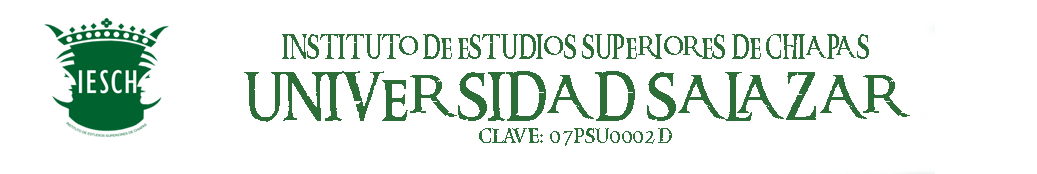
<style>
.page{position:relative;width:1037px;height:174px;background:#ffffff}
.page>*{position:absolute;margin:0}
.t1{font:23.2px "RingbearerMedium";color:#2c6d38;scale:0.96 1}
.t2{font:47.1px "RingbearerMedium";color:#2c6d38;scale:1.11 1}
</style>
<div class="page">
<p class="t1" style="left:282px;top:34px;width:587px;height:25px">INSTITUTO DE ESTUDIOS SUPERIORES DE CHIAPAS</p>
<p class="t2" style="left:244px;top:71px;width:666px;height:51px">UNIVERSIDAD SALAZAR</p>
<p class="t1" style="left:479px;top:128px;width:193px;height:18px">clave: 07psu0002d</p>
</div>
